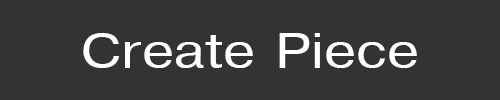
<style>
.page{position:relative;width:500px;height:100px;background:#333333}
.page>*{position:absolute;margin:0}
.t1{font:48px "Helvetica";color:#ffffff;scale:1.2 1}
</style>
<div class="page">
<p class="t1" style="left:83px;top:33px;width:334px;height:35px">Create Piece</p>
</div>
